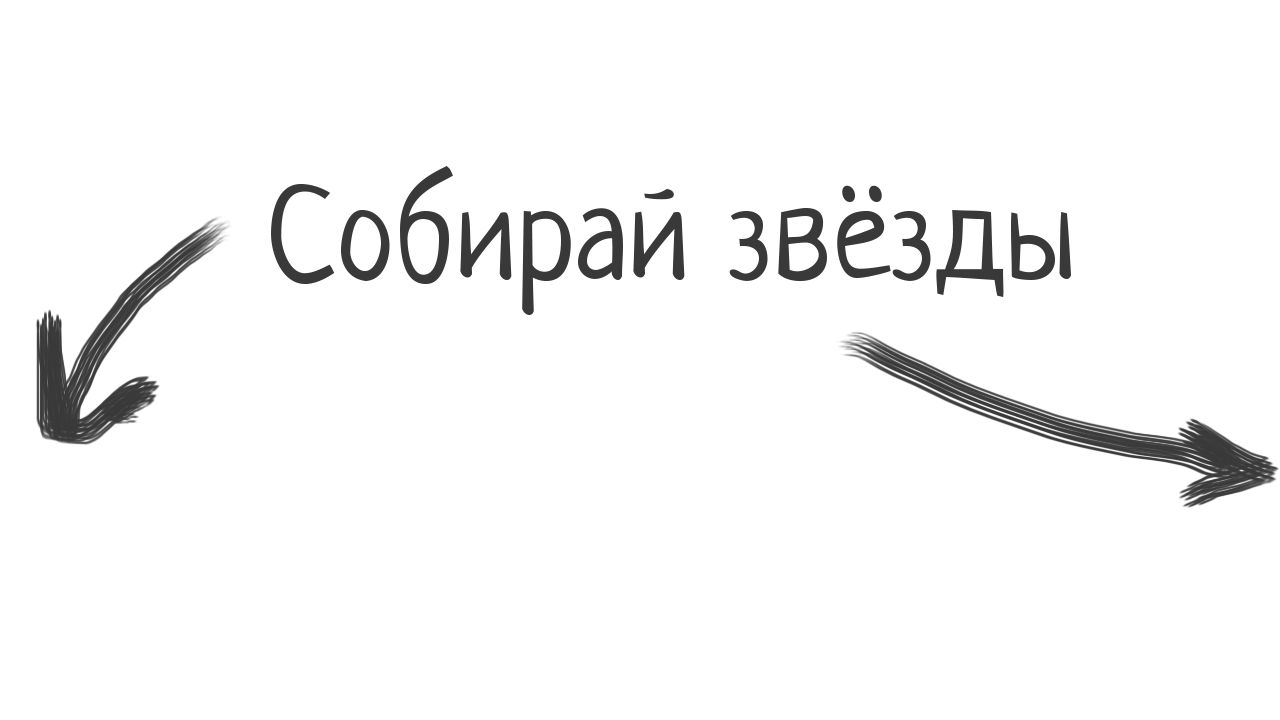
<style>
.page{position:relative;width:1280px;height:720px;background:#ffffff}
.page>*{position:absolute;margin:0}
.t1{font:132px "Neucha";color:#393939}
</style>
<div class="page">
<p class="t1" style="left:271px;top:166px;width:800px;height:149px">Собирай звёзды</p>
</div>
